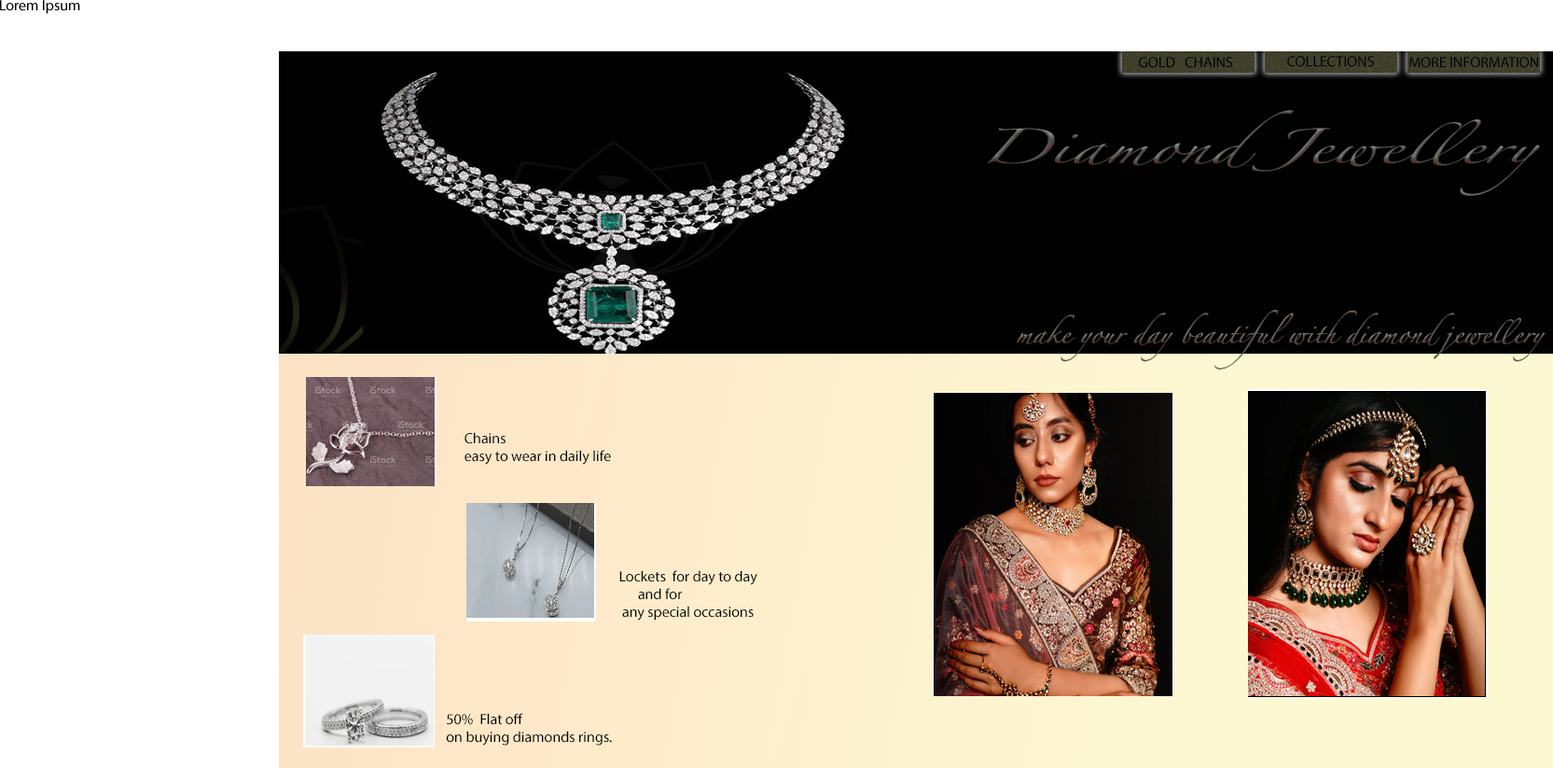
<style>
.page{position:relative;width:1553px;height:768px;background:#010101}
.page>*{position:absolute;margin:0}
.t1{font:14.9px "MyriadPro-Regular";color:#020202}
.t2{font:14.9px "MyriadPro-Regular";color:#000000}
</style>
<div class="page">
<p class="t1" style="left:0px;top:0px;width:80px;height:14px">Lorem Ipsum</p>
<p class="t2" style="left:1139px;top:57px;width:94px;height:11px">GOLD   CHAINS</p>
<p class="t1" style="left:1287px;top:56px;width:87px;height:11px">COLLECTIONS</p>
<p class="t1" style="left:1410px;top:57px;width:128px;height:11px">MORE INFORMATION</p>
<p class="t1" style="left:465px;top:432px;width:146px;height:33px">Chains  <br>easy to wear in daily life</p>
<p class="t1" style="left:619px;top:570px;width:138px;height:50px">Lockets  for day to day <br>      and for<br> any special occasions</p>
<p class="t1" style="left:446px;top:713px;width:166px;height:32px">50%  Flat off <br>on buying diamonds rings.</p>
</div>
